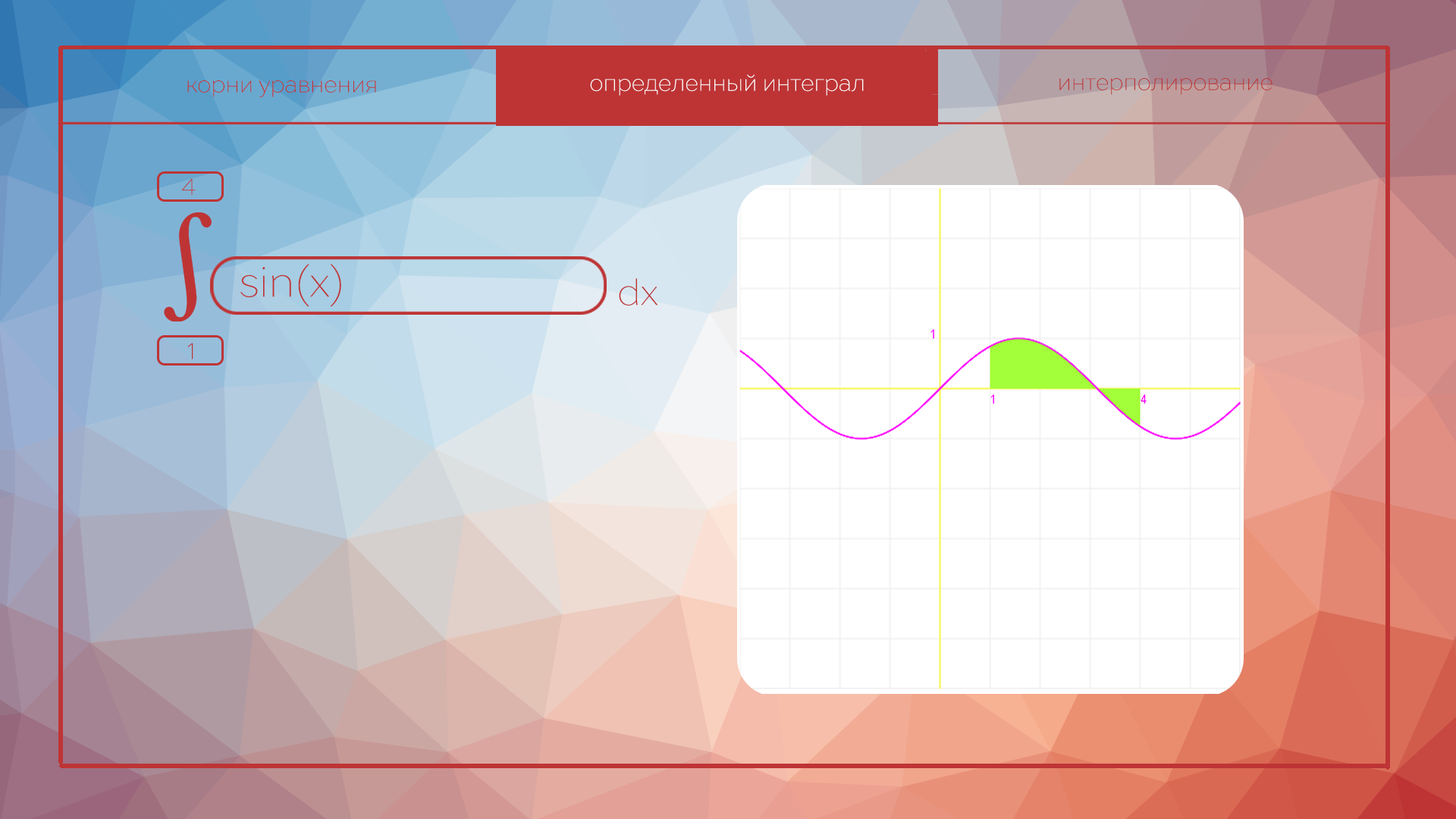
<style>
.page{position:relative;width:1456px;height:819px}
.page>*{position:absolute;margin:0}
.t1{font:22.7px "TTDrugs-Thin";color:#ffffff}
.t2{font:22.7px "TTDrugs-Thin";color:#be3435}
.t3{font:22.7px "TTDrugs-Thin";color:#bb3f44}
.t4{font:41.7px "TTDrugs-Thin";color:#be3435}
.t5{font:36.4px "TTDrugs-Thin";color:#be3435}
</style>
<div class="page">
<p class="t1" style="left:590px;top:74px;width:274px;height:22px">определенный интеграл</p>
<p class="t2" style="left:187px;top:80px;width:189px;height:18px">корни уравнения</p>
<p class="t2" style="left:1059px;top:78px;width:213px;height:17px">интерполирование</p>
<p class="t3" style="left:182px;top:179px;width:14px;height:16px">4</p>
<p class="t4" style="left:240px;top:264px;width:101px;height:43px">sin(x)</p>
<p class="t5" style="left:619px;top:278px;width:39px;height:28px">dx</p>
<p class="t2" style="left:187px;top:343px;width:6px;height:16px">1</p>
</div>
